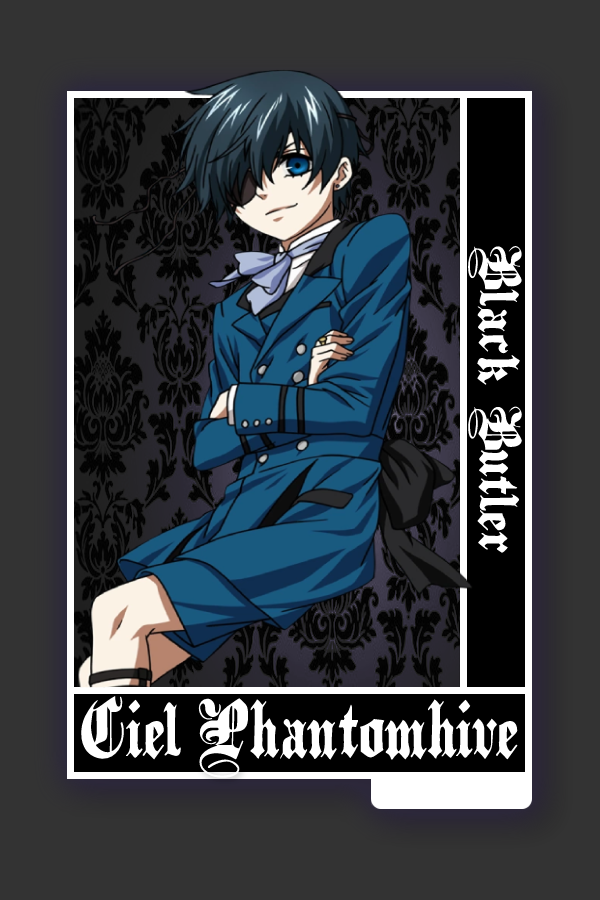
<style>
.page{position:relative;width:600px;height:900px;background:#333333}
.page>*{position:absolute;margin:0}
.t1{font:48.8px "PlainBlackWide-Normal";color:#ffffff}
.t2{font:67px "PlainBlack-Normal";color:#ffffff}
</style>
<div class="page">
<p class="t1" style="left:468px;top:246px;width:54px;height:307px;rotate:90deg">Black Butler</p>
<p class="t2" style="left:81px;top:696px;width:437px;height:82px">Ciel Phantomhive</p>
</div>
